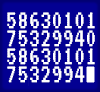
<style>
.page{position:relative;width:100px;height:92px;background:#030092}
.page>*{position:absolute;margin:0}
.t1{font:27px/18px "VT323-Regular";letter-spacing:0.005em;color:#ffffff}
</style>
<div class="page">
<p class="t1" style="left:7px;top:12px;width:88px;height:71px">58630101<br>75329940<br>58630101<br>7532994</p>
</div>
